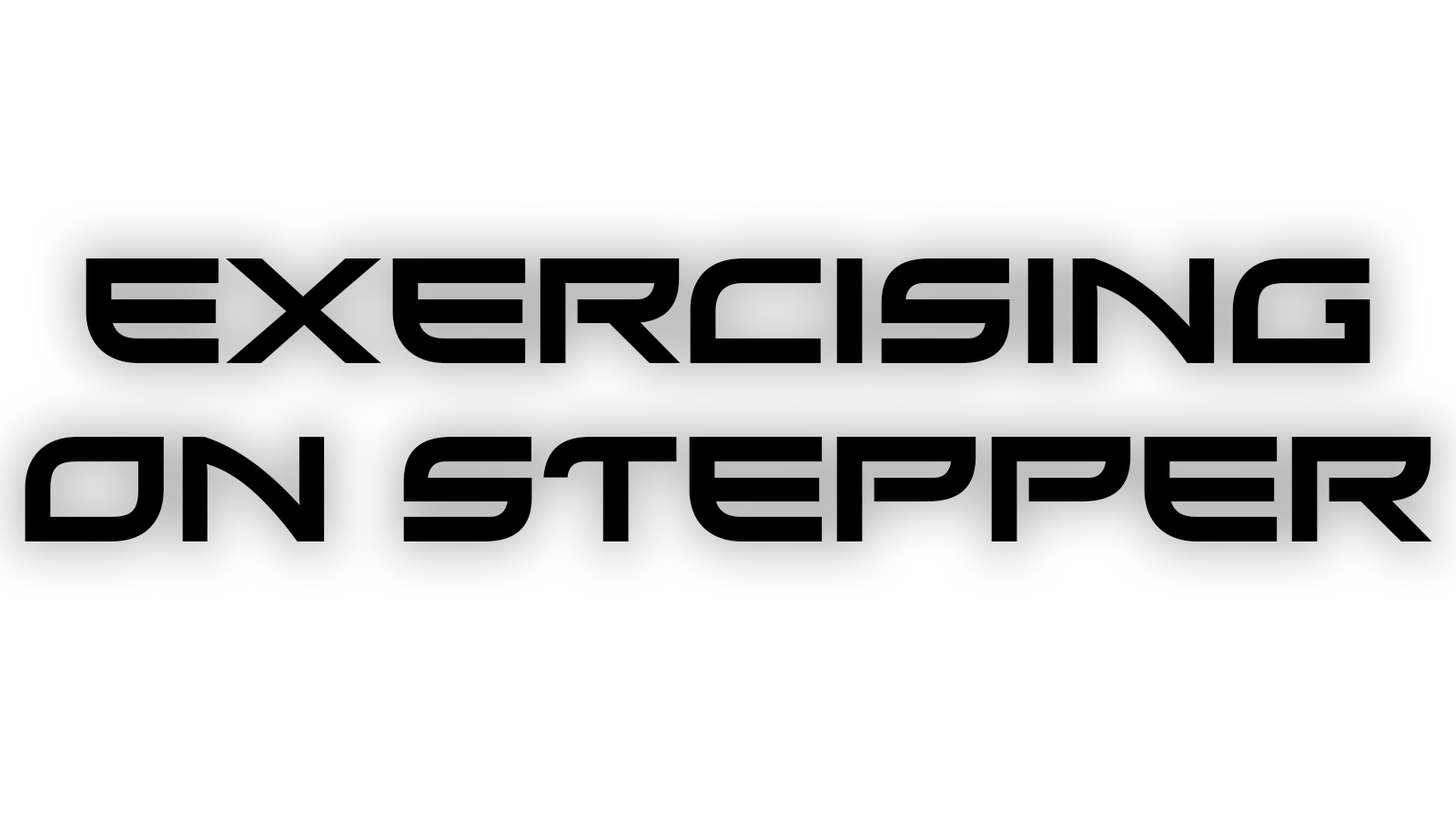
<style>
.page{position:relative;width:1456px;height:819px;background:#ffffff}
.page>*{position:absolute;margin:0}
.t1{font:149.1px "Xirod-Regular";color:#000000}
</style>
<div class="page">
<p class="t1" style="left:25px;top:258px;width:1407px;height:283px;text-align:center">Exercising<br>on stepper</p>
</div>
